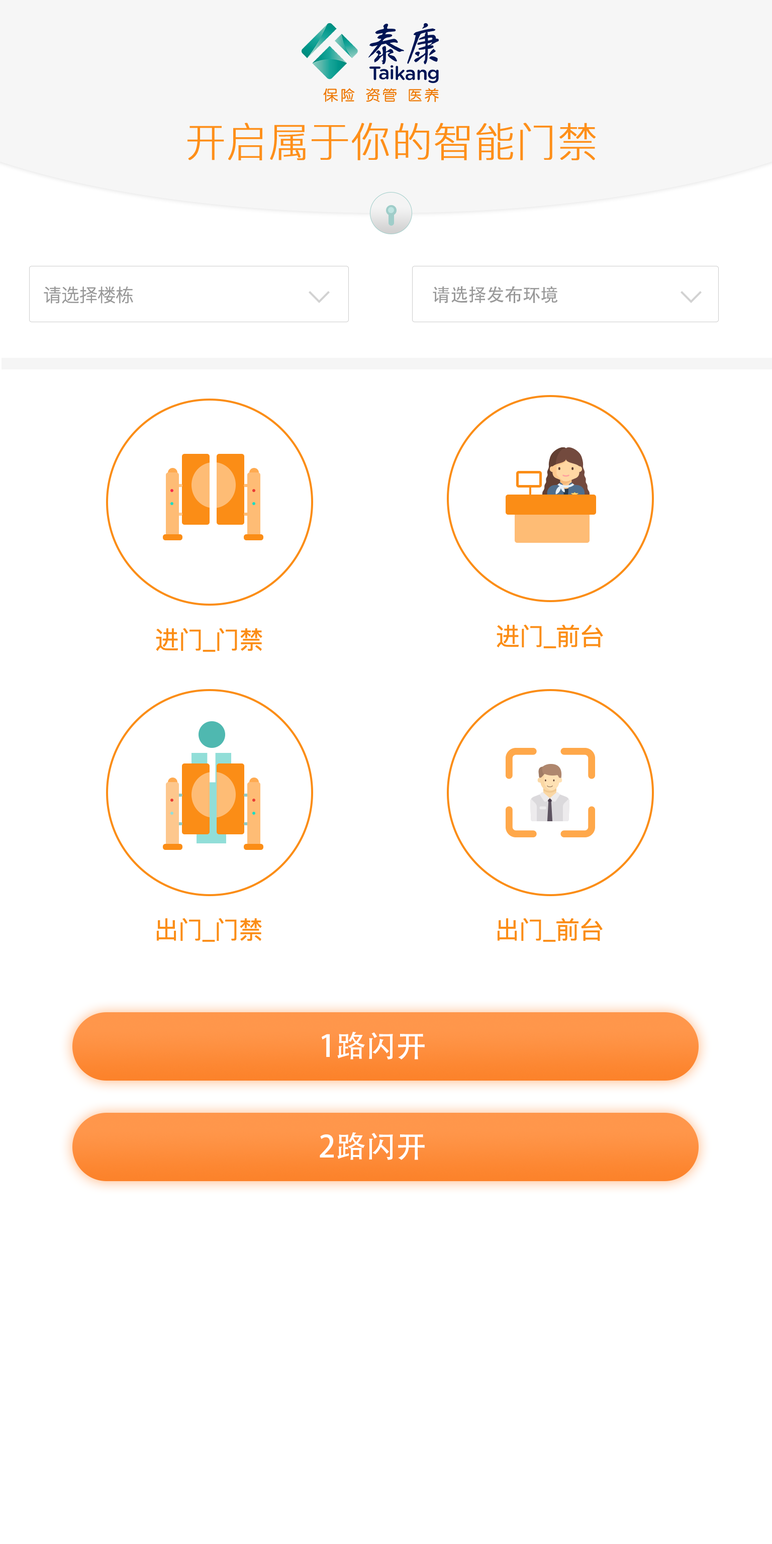
<style>
.page{position:relative;width:772px;height:1544px;background:#ffffff}
.page>*{position:absolute;margin:0}
.t1{font:40.2px "PingFangSC-Thin";color:#fe8f19;font-weight:bold}
.t2{font:18.1px "PingFangSC-Light";color:#999999}
.t3{font:18.1px "AdobeHeitiStd-Regular";color:#999999}
.t4{font:24.1px "PingFangSC-Regular";color:#fb8d16}
.t5{font:30.2px "AdobeHeitiStd-Regular";color:#ffffff}
</style>
<div class="page">
<p class="t1" style="left:188px;top:123px;width:408px;height:37px">开启属于你的智能门禁</p>
<p class="t2" style="left:44px;top:287px;width:89px;height:17px">请选择楼栋</p>
<p class="t3" style="left:433px;top:286px;width:125px;height:17px">请选择发布环境</p>
<p class="t4" style="left:156px;top:628px;width:106px;height:24px">进门_门禁</p>
<p class="t4" style="left:497px;top:624px;width:106px;height:24px">进门_前台</p>
<p class="t4" style="left:156px;top:918px;width:106px;height:24px">出门_门禁</p>
<p class="t4" style="left:497px;top:918px;width:106px;height:24px">出门_前台</p>
<p class="t5" style="left:322px;top:1032px;width:103px;height:28px">1路闪开</p>
<p class="t5" style="left:320px;top:1132px;width:105px;height:28px">2路闪开</p>
</div>
